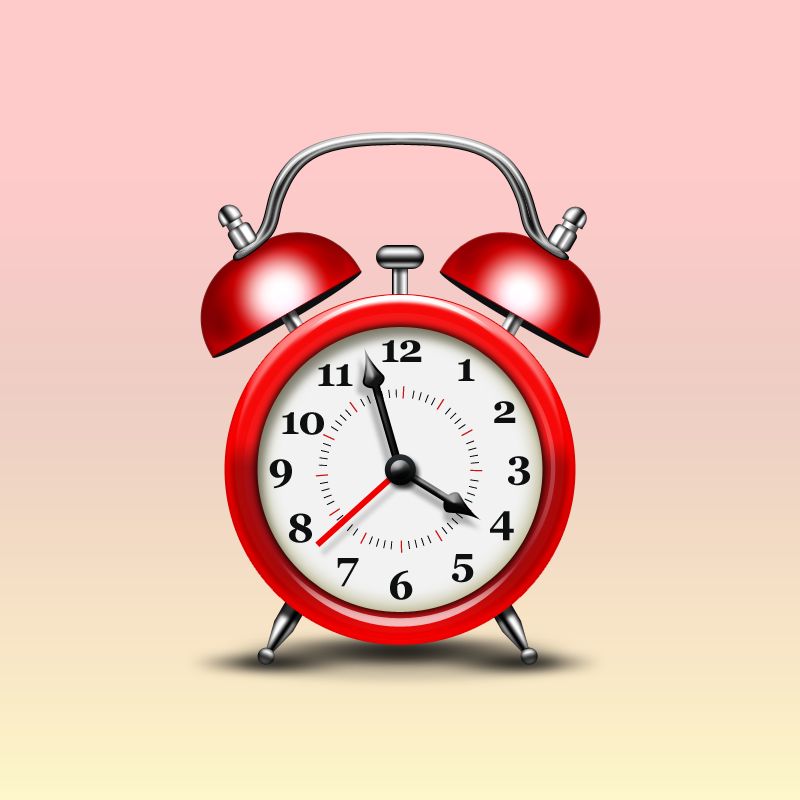
<style>
.page{position:relative;width:800px;height:800px}
.page>*{position:absolute;margin:0}
.t1{font:40px "Georgia-Bold";letter-spacing:-0.04em;color:#0e0f10}
.t2{font:8.5px/37.4px "ArialMT";letter-spacing:0.545em;color:#000000}
.t3{font:12.8px/37.4px "ArialMT";letter-spacing:0.545em;color:#cc1313}
</style>
<div class="page">
<p class="t1" style="left:382px;top:340px;width:40px;height:22px">12</p>
<p class="t1" style="left:318px;top:364px;width:35px;height:22px">11</p>
<p class="t1" style="left:458px;top:359px;width:17px;height:22px">1</p>
<p class="t2" style="left:315px;top:386px;width:168px;height:167px"><span class="t3">|</span>||||<span class="t3">|</span>||||<span class="t3">|</span>||||<span class="t3">|</span>||||<span class="t3">|</span>||||<span class="t3">|</span>||||<span class="t3">|</span>||||<span class="t3">|</span>||||<span class="t3">|</span>||||<span class="t3">|</span>||||<span class="t3">|</span>||||<span class="t3">|</span>||||||||||</p>
<p class="t1" style="left:494px;top:401px;width:22px;height:22px">2</p>
<p class="t1" style="left:282px;top:412px;width:42px;height:23px">10</p>
<p class="t1" style="left:269px;top:459px;width:23px;height:30px">9</p>
<p class="t1" style="left:508px;top:456px;width:22px;height:30px">3</p>
<p class="t1" style="left:289px;top:513px;width:23px;height:30px">8</p>
<p class="t1" style="left:490px;top:511px;width:24px;height:30px">4</p>
<p class="t1" style="left:337px;top:558px;width:22px;height:29px">7</p>
<p class="t1" style="left:452px;top:554px;width:22px;height:29px">5</p>
<p class="t1" style="left:390px;top:570px;width:23px;height:30px">6</p>
</div>
